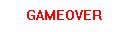
<style>
.page{position:relative;width:128px;height:32px;background:#ffffff}
.page>*{position:absolute;margin:0}
.t1{font:14px "System";color:#ff0000}
</style>
<div class="page">
<p class="t1" style="left:27px;top:10px;width:75px;height:10px">GAMEOVER</p>
</div>
